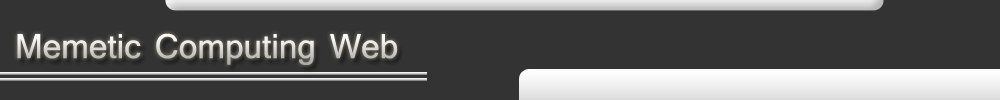
<style>
.page{position:relative;width:1000px;height:100px;background:#333333}
.page>*{position:absolute;margin:0}
.t1{font:36px "Shruti"}
</style>
<div class="page">
<p class="t1" style="left:17px;top:33px;width:381px;height:33px">Memetic Computing Web</p>
</div>
